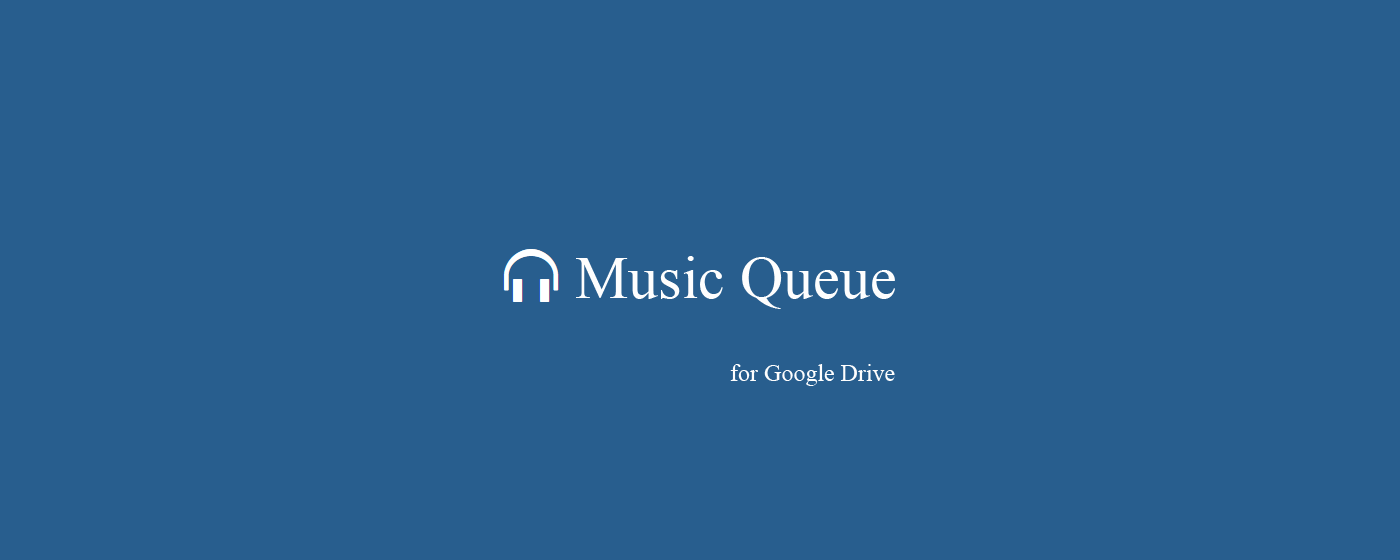
<style>
.page{position:relative;width:1400px;height:560px;background:#285e8e}
.page>*{position:absolute;margin:0}
.t1{font:60px "TimesNewRomanPSMT";color:#fefefe}
.t2{font:24px "TimesNewRomanPSMT";color:#fefefe}
</style>
<div class="page">
<p class="t1" style="left:576px;top:256px;width:319px;height:53px">Music Queue</p>
<p class="t2" style="left:730px;top:364px;width:165px;height:22px">for Google Drive</p>
</div>
